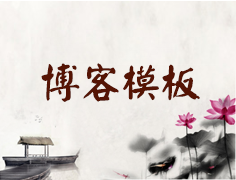
<style>
.page{position:relative;width:236px;height:180px}
.page>*{position:absolute;margin:0}
.t1{font:40px "JetLink-MediumYanKai";color:#551404}
</style>
<div class="page">
<p class="t1" style="left:41px;top:63px;width:159px;height:39px">博客模板</p>
</div>
